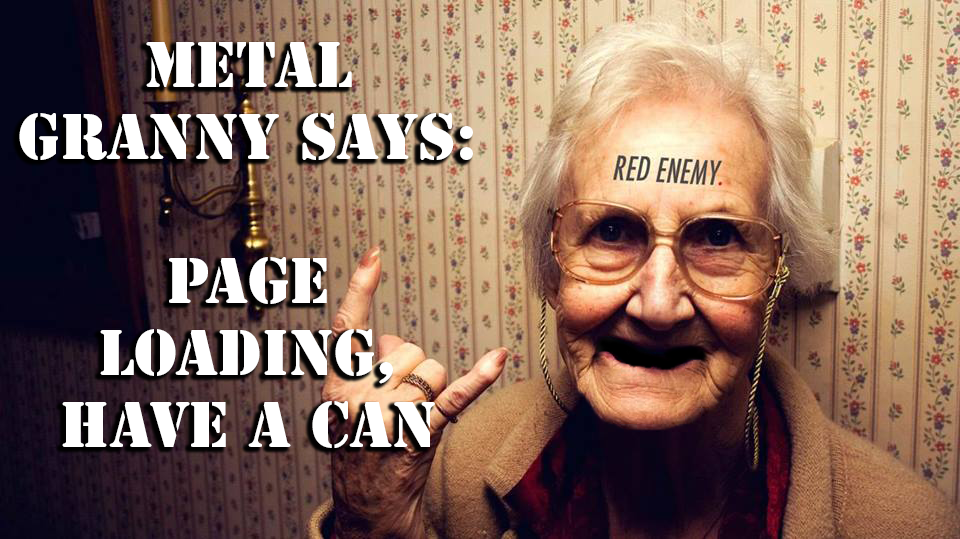
<style>
.page{position:relative;width:960px;height:539px}
.page>*{position:absolute;margin:0}
.t1{font:60px "StencilStd";color:#ffffff}
</style>
<div class="page">
<p class="t1" style="left:19px;top:42px;width:454px;height:406px;text-align:center">Metal Granny Says: <br><br>page <br>loading, have a can</p>
</div>
